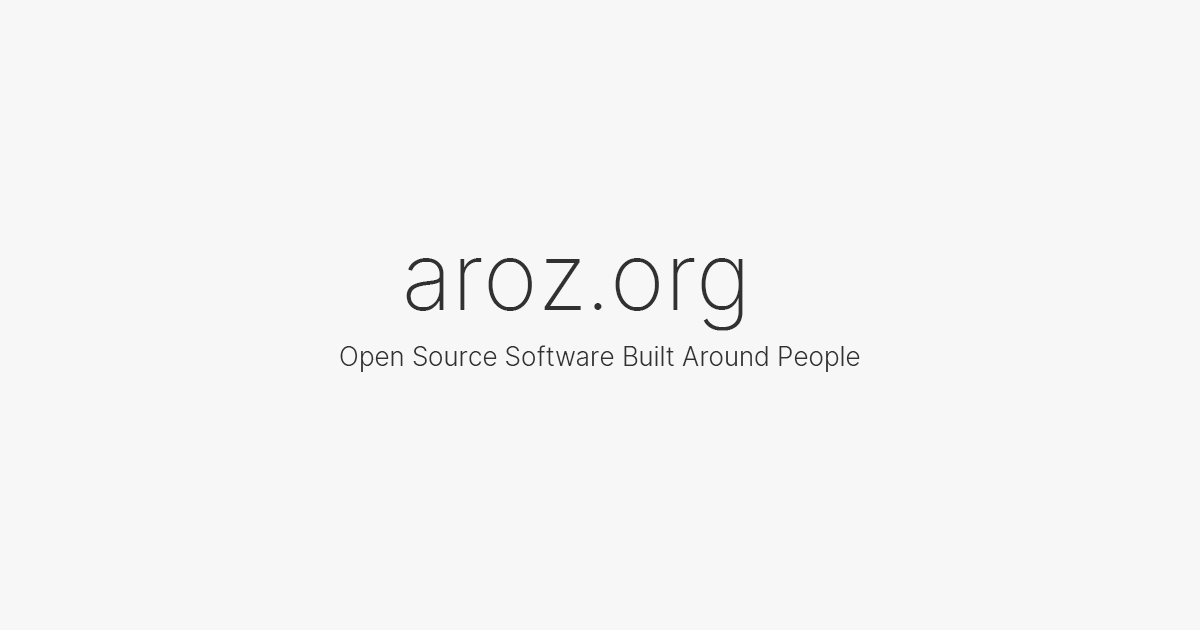
<style>
.page{position:relative;width:1200px;height:630px;background:#f7f7f7}
.page>*{position:absolute;margin:0}
.t1{font:93px "Sarasa-UI-K-Extralight";color:#313131}
.t2{font:26px "Sarasa-UI-K-Light";color:#313131}
</style>
<div class="page">
<p class="t1" style="left:406px;top:258px;width:337px;height:73px">aroz.org</p>
<p class="t2" style="left:340px;top:345px;width:520px;height:27px">Open Source Software Built Around People</p>
</div>
